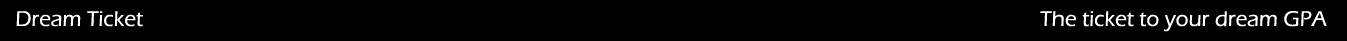
<style>
.page{position:relative;width:1347px;height:41px;background:#000000}
.page>*{position:absolute;margin:0}
.t1{font:22px "ErasITC-Medium";color:#ffffff}
</style>
<div class="page">
<p class="t1" style="left:16px;top:11px;width:127px;height:16px">Dream Ticket</p>
<p class="t1" style="left:1040px;top:11px;width:287px;height:21px">The ticket to your dream GPA</p>
</div>
